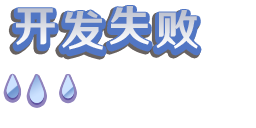
<style>
.page{position:relative;width:256px;height:128px;background:#ffffff}
.page>*{position:absolute;margin:0}
.t1{font:42.7px "HYWenHei-HEW";letter-spacing:0.065em}
</style>
<div class="page">
<p class="t1" style="left:109px;top:6px;width:40px;height:39px">失</p>
<p class="t1" style="left:16px;top:8px;width:39px;height:37px">开</p>
<p class="t1" style="left:62px;top:10px;width:41px;height:40px">发</p>
<p class="t1" style="left:156px;top:10px;width:42px;height:39px">败</p>
</div>
